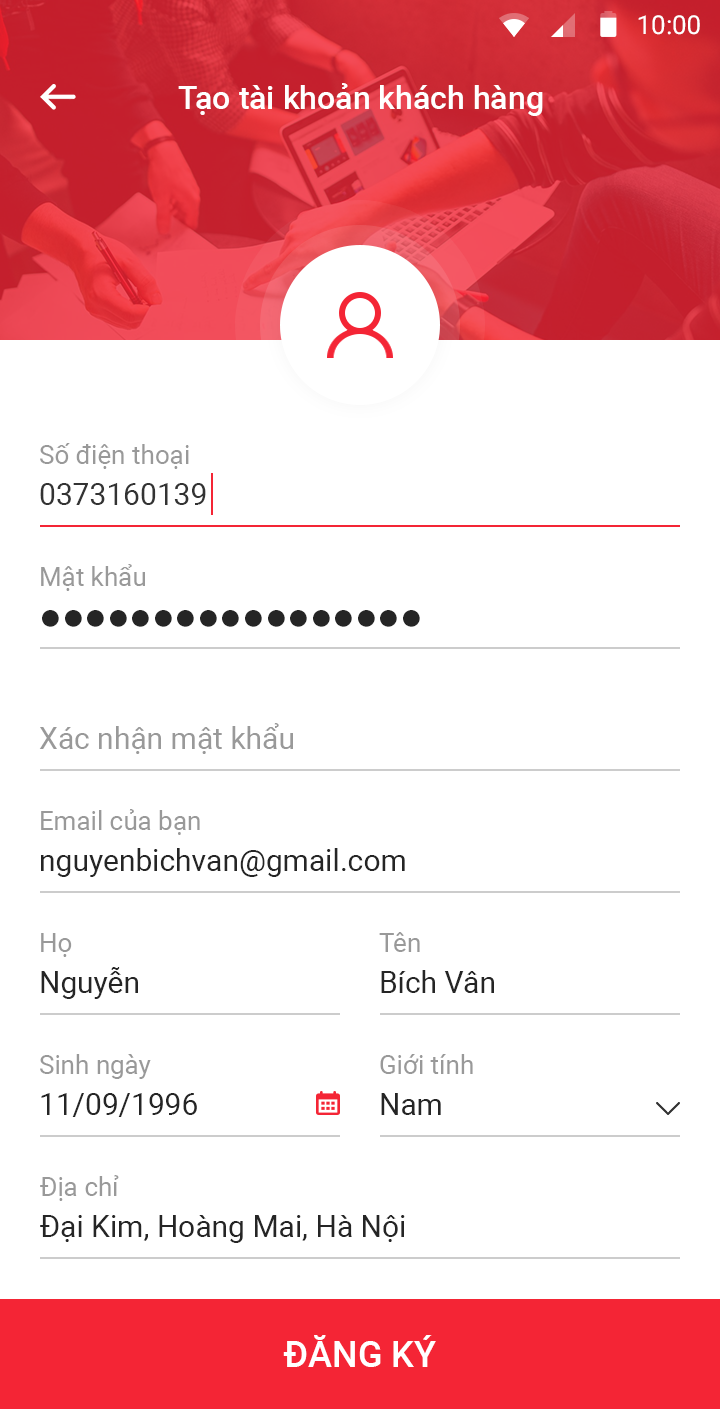
<style>
.page{position:relative;width:720px;height:1409px;background:#ffffff}
.page>*{position:absolute;margin:0}
.t1{font:26px "Roboto-Regular";color:#ffffff}
.t2{font:32px "Roboto-Medium";color:#ffffff}
.t3{font:26px "Roboto-Regular";color:#999999}
.t4{font:30px "Roboto-Regular";color:#333333}
.t5{font:80px "MyriadPro-Regular";color:#252525}
.t6{font:30px "Roboto-Regular";color:#999999}
.t7{font:30px "Roboto-Regular";color:#252525}
.t8{font:36px "Roboto-Medium";color:#ffffff;text-transform:uppercase}
</style>
<div class="page">
<p class="t1" style="left:638px;top:15px;width:62px;height:20px">10:00</p>
<p class="t2" style="left:178px;top:83px;width:365px;height:33px">Tạo tài khoản khách hàng</p>
<p class="t3" style="left:40px;top:443px;width:149px;height:26px">Số điện thoại</p>
<p class="t4" style="left:40px;top:483px;width:166px;height:22px">0373160139</p>
<p class="t3" style="left:41px;top:564px;width:104px;height:27px">Mật khẩu</p>
<p class="t5" style="left:42px;top:610px;width:378px;height:17px">•••••••••••••••••</p>
<p class="t6" style="left:39px;top:723px;width:254px;height:31px">Xác nhận mật khẩu</p>
<p class="t3" style="left:41px;top:809px;width:159px;height:26px">Email của bạn</p>
<p class="t7" style="left:41px;top:848px;width:364px;height:29px">nguyenbichvan@gmail.com</p>
<p class="t3" style="left:41px;top:933px;width:31px;height:24px">Họ</p>
<p class="t3" style="left:379px;top:932px;width:41px;height:20px">Tên</p>
<p class="t7" style="left:41px;top:967px;width:97px;height:32px">Nguyễn</p>
<p class="t7" style="left:381px;top:970px;width:113px;height:23px">Bích Vân</p>
<p class="t3" style="left:40px;top:1054px;width:111px;height:25px">Sinh ngày</p>
<p class="t3" style="left:380px;top:1054px;width:93px;height:20px">Giới tính</p>
<p class="t7" style="left:41px;top:1093px;width:156px;height:24px">11/09/1996</p>
<p class="t7" style="left:381px;top:1093px;width:60px;height:22px">Nam</p>
<p class="t3" style="left:40px;top:1175px;width:79px;height:26px">Địa chỉ</p>
<p class="t7" style="left:40px;top:1215px;width:365px;height:28px">Đại Kim, Hoàng Mai, Hà Nội</p>
<p class="t8" style="left:283px;top:1335px;width:153px;height:32px">đăng ký</p>
</div>
